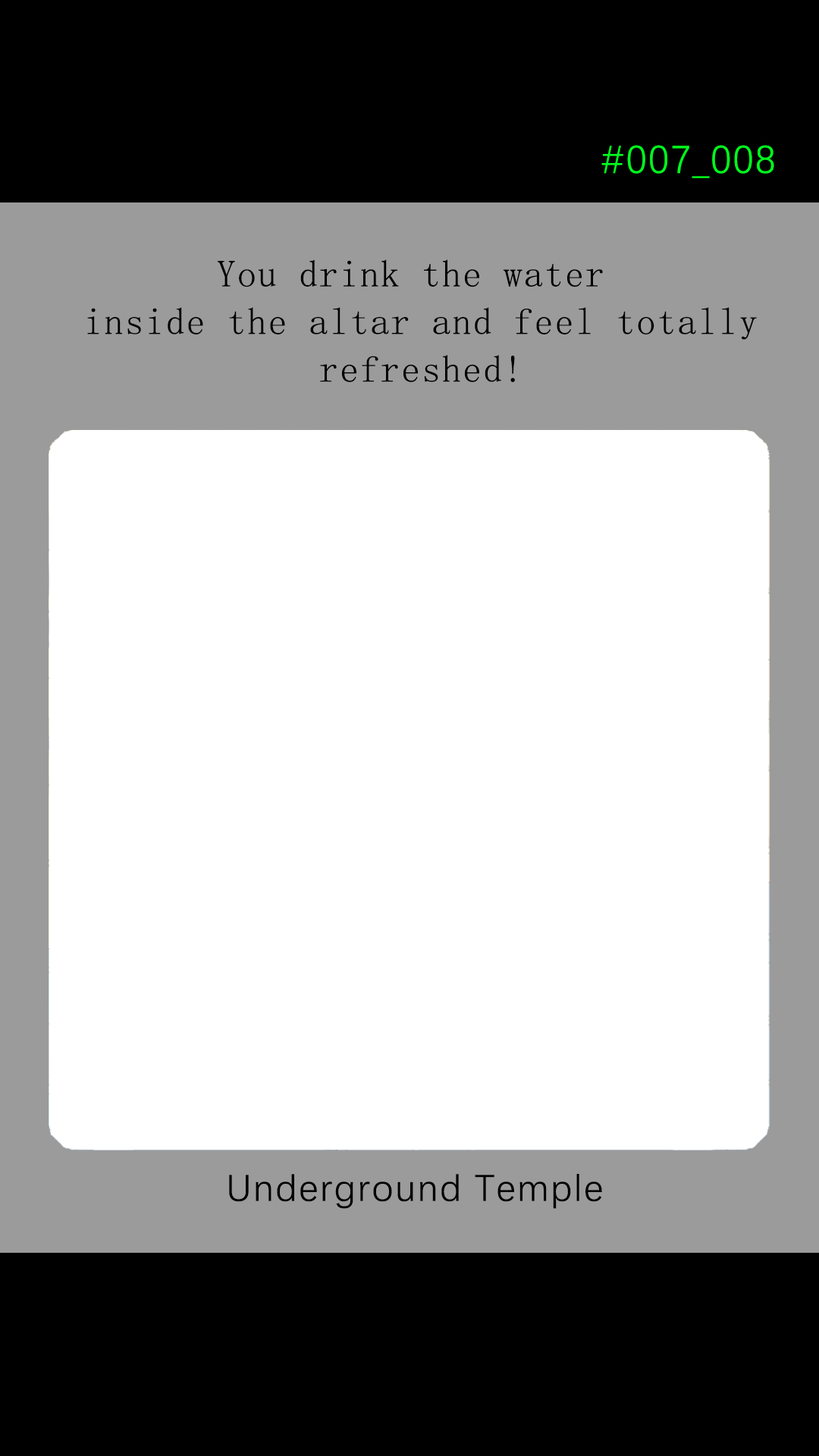
<style>
.page{position:relative;width:819px;height:1456px;background:#ffffff}
.page>*{position:absolute;margin:0}
.t1{font:39.2px "DengXian-Regular";letter-spacing:0.04em;color:#00ff1e}
.t2{font:37.9px/47.6px "SimSun";letter-spacing:0.04em;color:#000000}
.t3{font:37.9px "DengXian-Regular";letter-spacing:0.04em;color:#000000}
</style>
<div class="page">
<p class="t1" style="left:601px;top:145px;width:173px;height:33px">#007_008</p>
<p class="t2" style="left:87px;top:259px;width:670px;height:123px;text-align:center">You drink the water <br>inside the altar and feel totally<br> refreshed!</p>
<p class="t3" style="left:229px;top:1174px;width:373px;height:35px">Underground Temple</p>
</div>
